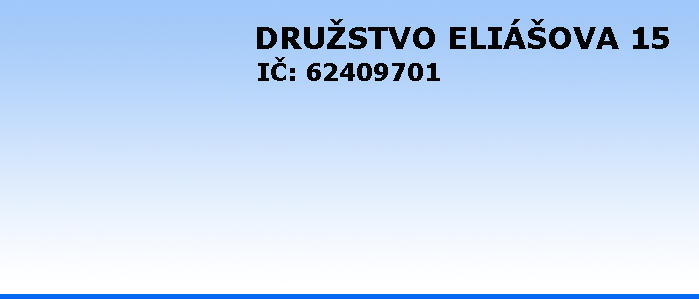
<style>
.page{position:relative;width:699px;height:300px}
.page>*{position:absolute;margin:0}
.t1{font:30px "Verdana-Bold";color:#040404}
.t2{font:24px "Verdana-Bold";color:#040404}
</style>
<div class="page">
<p class="t1" style="left:257px;top:19px;width:412px;height:30px">DRUŽSTVO ELIÁŠOVA 15</p>
<p class="t2" style="left:258px;top:57px;width:182px;height:24px">IČ: 62409701</p>
</div>
